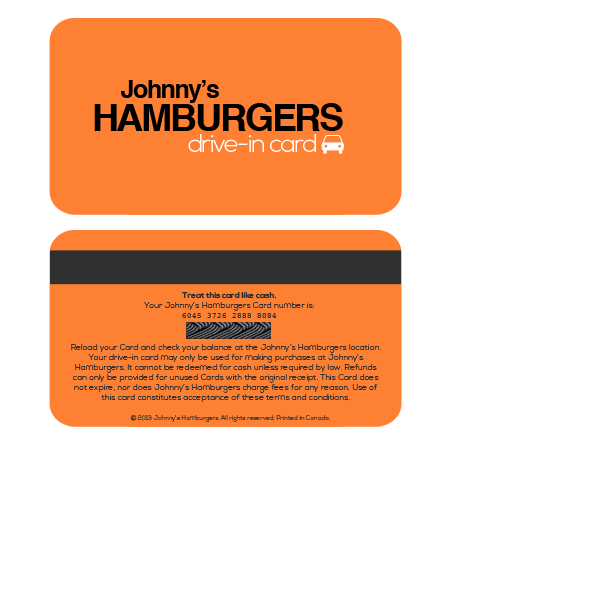
<style>
.page{position:relative;width:600px;height:600px;background:#ffffff}
.page>*{position:absolute;margin:0}
.t1{font:25px "Helvetica-Bold";letter-spacing:-0.06em;color:#000000}
.t2{font:37.5px "Helvetica-Bold";letter-spacing:-0.06em;color:#000000}
.t3{font:25px "NexaLight";letter-spacing:-0.06em;color:#ffffff}
.t4{font:8.3px "NexaLight";color:#303030}
.t5{font:8.3px "NexaBold";color:#303030}
.t6{font:8.3px "Courier";color:#303030}
.t7{font:6.2px "NexaLight";color:#303030}
</style>
<div class="page">
<p class="t1" style="left:121px;top:80px;width:98px;height:23px">Johnny’s</p>
<p class="t2" style="left:94px;top:103px;width:249px;height:28px">HAMBURGERS</p>
<p class="t3" style="left:188px;top:134px;width:128px;height:18px">drive-in card</p>
<p class="t4" style="left:144px;top:292px;width:170px;height:26px;text-align:center"><span class="t5">Treat this card like cash.<br></span>Your Johnny’s Hamburgers Card number is: <br><span class="t6">6045 3726 2888 8084</span></p>
<p class="t4" style="left:71px;top:344px;width:310px;height:58px;text-align:center">Reload your Card and check your balance at the Johnny’s Hamburgers location. Your drive-in card may only be used for making purchases at Johnny’s Hamburgers. It cannot be redeemed for cash unless required by law. Refunds can only be provided for unused Cards with the original receipt. This Card does not expire, nor does Johnny’s Hamburgers charge fees for any reason. Use of this card constitutes acceptance of these terms and conditions.</p>
<p class="t7" style="left:130px;top:415px;width:200px;height:7px">© 2013 Johnny’s Hamburgers. All rights reserved. Printed in Canada.</p>
</div>
